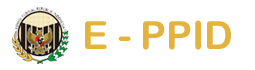
<style>
.page{position:relative;width:255px;height:70px;background:#ffffff}
.page>*{position:absolute;margin:0}
.t1{font:38.9px "ArialRoundedMTBold";color:#e3b53e}
</style>
<div class="page">
<p class="t1" style="left:85px;top:20px;width:146px;height:30px">E - PPID</p>
</div>
